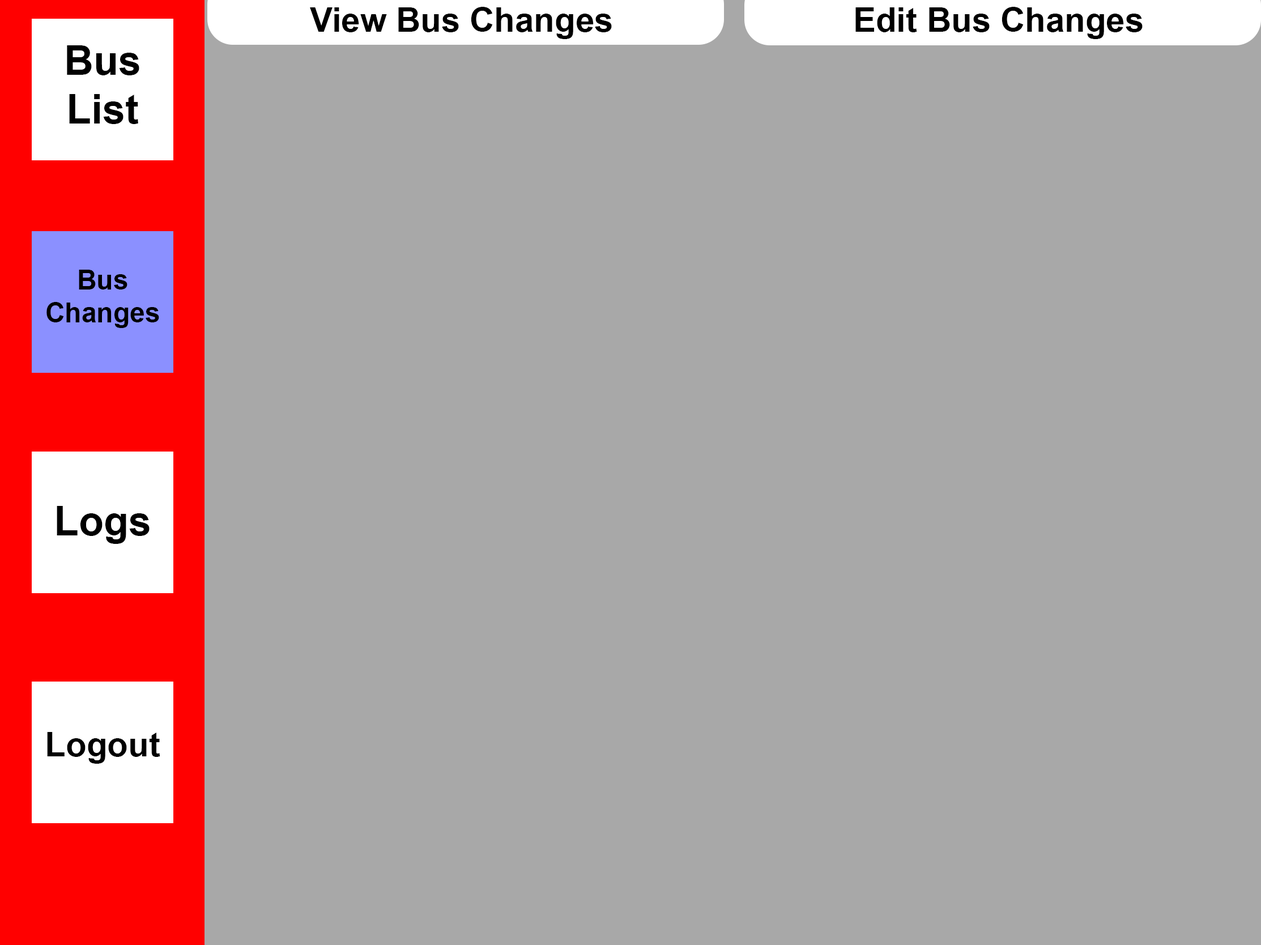
<style>
.page{position:relative;width:1261px;height:945px;background:#a8a8a8}
.page>*{position:absolute;margin:0}
.t1{font:34px "Arial-BoldMT";color:#000000}
.t2{font:40.8px "Arial-BoldMT";color:#000000}
.t3{font:27.2px "Arial-BoldMT";color:#000000}
</style>
<div class="page">
<p class="t1" style="left:310px;top:7px;width:302px;height:32px">View Bus Changes</p>
<p class="t1" style="left:856px;top:7px;width:287px;height:32px">Edit Bus Changes</p>
<p class="t2" style="left:67px;top:45px;width:72px;height:79px;text-align:center">Bus List</p>
<p class="t3" style="left:46px;top:270px;width:113px;height:58px;text-align:center">Bus Changes</p>
<p class="t2" style="left:57px;top:506px;width:93px;height:38px">Logs</p>
<p class="t1" style="left:47px;top:732px;width:113px;height:32px">Logout</p>
</div>
